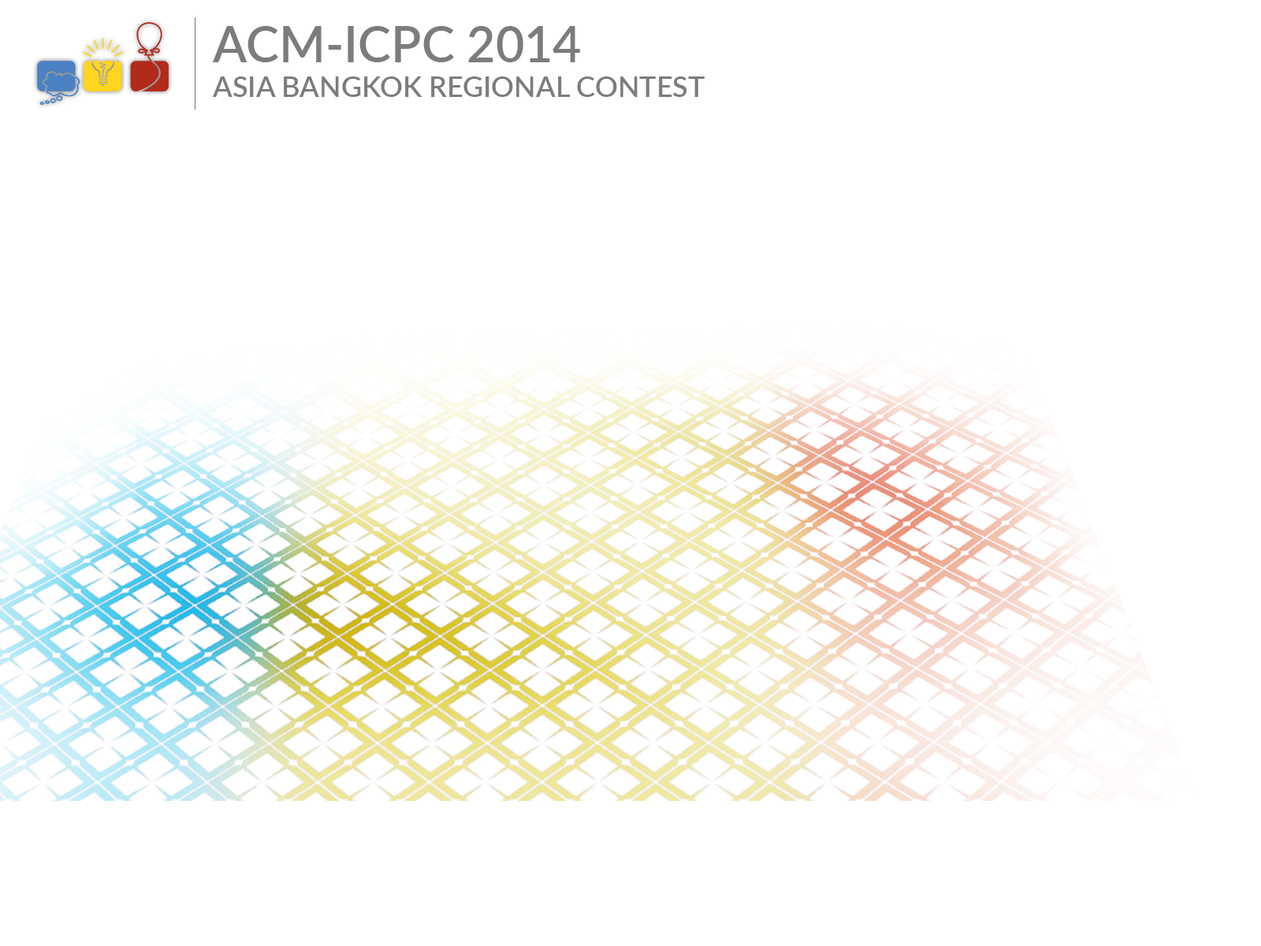
<style>
.page{position:relative;width:1261px;height:946px;background:#ffffff}
.page>*{position:absolute;margin:0}
.t1{font:49.6px "Lato-Semibold";color:#7c7c7c}
.t2{font:28.4px "Lato-Semibold";color:#7c7c7c}
</style>
<div class="page">
<p class="t1" style="left:212px;top:26px;width:368px;height:36px">ACM-ICPC 2014</p>
<p class="t2" style="left:213px;top:76px;width:492px;height:21px">ASIA BANGKOK REGIONAL CONTEST</p>
</div>
